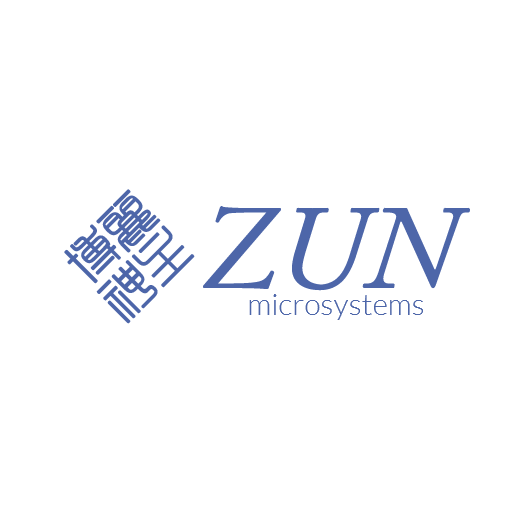
<style>
.page{position:relative;width:512px;height:512px;background:#ffffff}
.page>*{position:absolute;margin:0}
.t1{font:50px/50px "¾­µä·±·½×­ Regular";color:#4d66a9}
.t2{font:120px "ACaslonPro-Italic";color:#4d66a9}
.t3{font:30px "Lato-Light";color:#4d66a9}
</style>
<div class="page">
<p class="t1" style="left:64px;top:189px;width:131px;height:135px;text-align:center;rotate:-45deg">博丽<br>神主</p>
<p class="t2" style="left:203px;top:206px;width:267px;height:85px">ZUN</p>
<p class="t3" style="left:249px;top:294px;width:174px;height:26px">microsystems</p>
</div>
